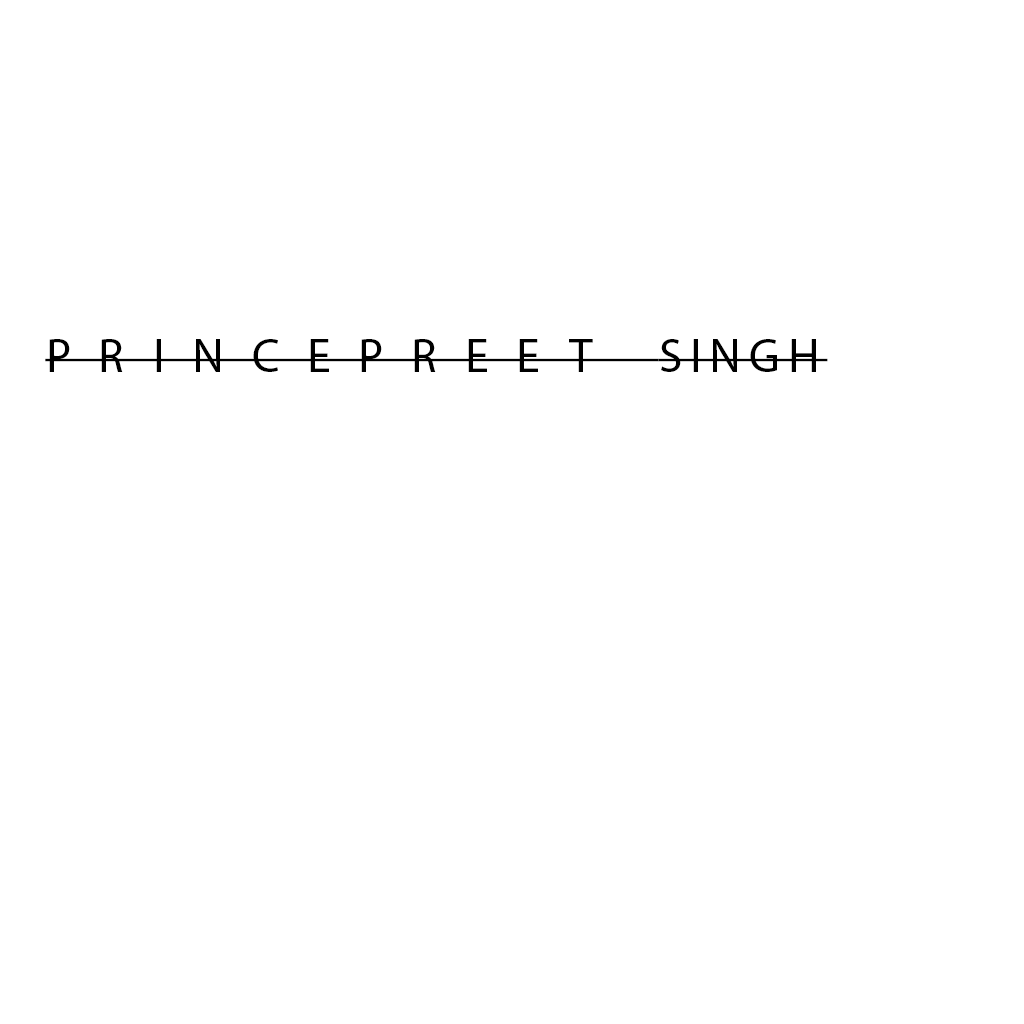
<style>
.page{position:relative;width:1024px;height:1024px;background:#ffffff}
.page>*{position:absolute;margin:0}
.t1{font:48px "MyriadPro-Regular";letter-spacing:0.58em;color:#000000;text-transform:uppercase}
.t2{font:48px "MyriadPro-Regular";letter-spacing:0.16em;color:#000000;text-transform:uppercase}
</style>
<div class="page">
<p class="t1" style="left:45px;top:339px;width:783px;height:33px">Princepreet <span class="t2">SINGH</span></p>
</div>
